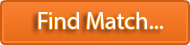
<style>
.page{position:relative;width:190px;height:45px}
.page>*{position:absolute;margin:0}
.t1{font:24px "MyriadPro-Regular";color:#ffffff}
</style>
<div class="page">
<p class="t1" style="left:38px;top:12px;width:125px;height:17px">Find Match...</p>
</div>
